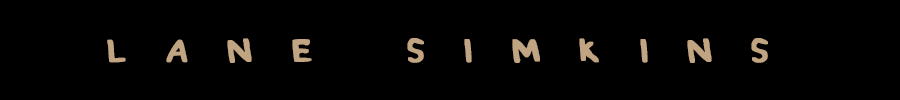
<style>
.page{position:relative;width:900px;height:100px;background:#000000}
.page>*{position:absolute;margin:0}
.t1{font:87.7px "NaomisHand-Regular";letter-spacing:0.36em;color:#c1a583;text-transform:uppercase;font-weight:bold}
</style>
<div class="page">
<p class="t1" style="left:107px;top:38px;width:661px;height:25px">Lane SIMKINS</p>
</div>
